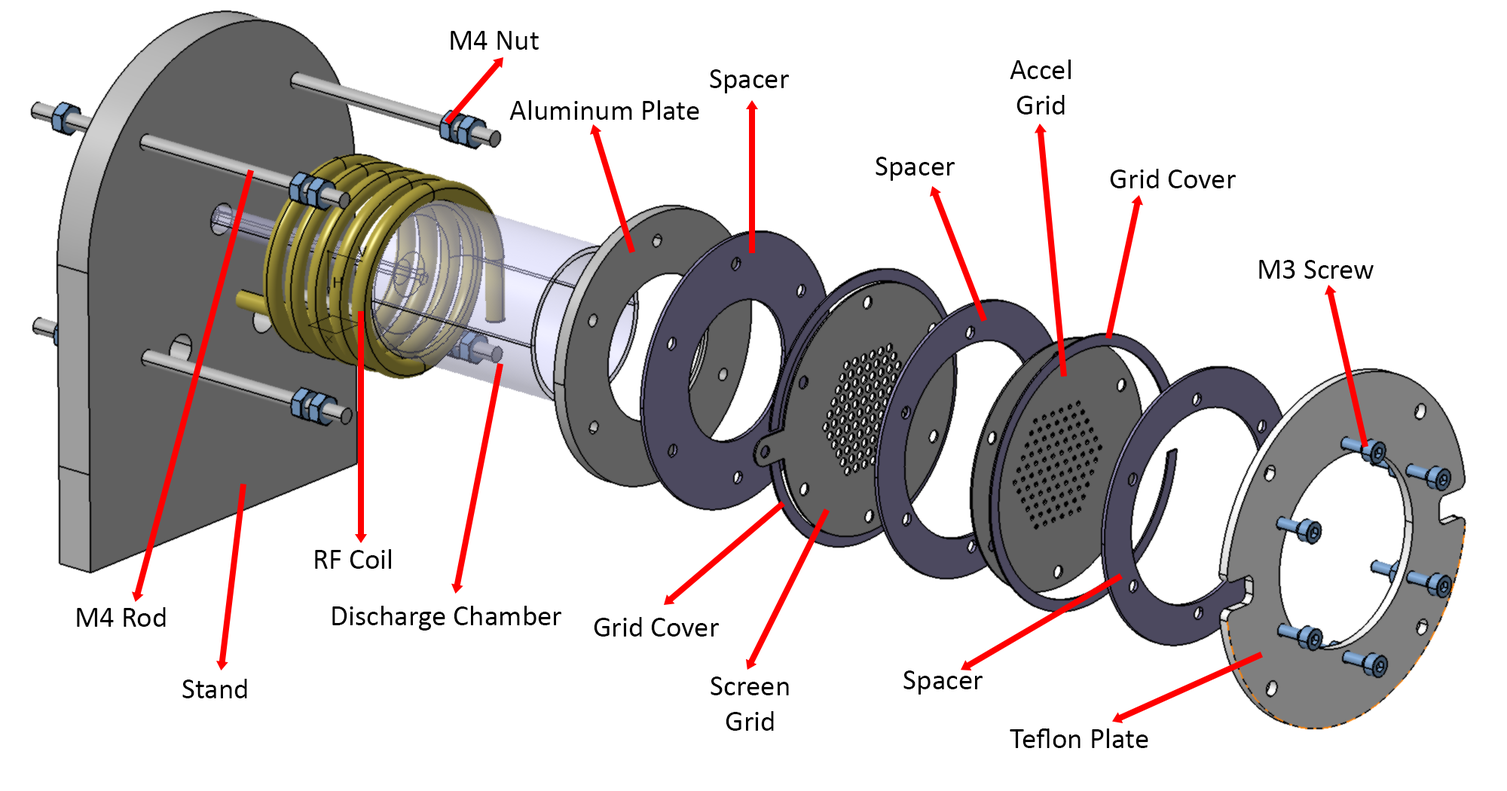
<style>
.page{position:relative;width:1507px;height:791px;background:#ffffff}
.page>*{position:absolute;margin:0}
.t1{font:29.4px "Calibri";color:#000000}
</style>
<div class="page">
<p class="t1" style="left:451px;top:31px;width:88px;height:19px">M4 Nut</p>
<p class="t1" style="left:1010px;top:60px;width:61px;height:55px;text-align:center">Accel<br>Grid</p>
<p class="t1" style="left:710px;top:69px;width:79px;height:24px">Spacer</p>
<p class="t1" style="left:509px;top:100px;width:190px;height:20px">Aluminum Plate</p>
<p class="t1" style="left:876px;top:157px;width:79px;height:24px">Spacer</p>
<p class="t1" style="left:1110px;top:169px;width:126px;height:19px">Grid Cover</p>
<p class="t1" style="left:1259px;top:260px;width:115px;height:19px">M3 Screw</p>
<p class="t1" style="left:315px;top:549px;width:76px;height:20px">RF Coil</p>
<p class="t1" style="left:332px;top:606px;width:229px;height:25px">Discharge Chamber</p>
<p class="t1" style="left:77px;top:607px;width:89px;height:20px">M4 Rod</p>
<p class="t1" style="left:594px;top:617px;width:125px;height:20px">Grid Cover</p>
<p class="t1" style="left:711px;top:677px;width:78px;height:54px;text-align:center">Screen<br>Grid</p>
<p class="t1" style="left:903px;top:671px;width:80px;height:24px">Spacer</p>
<p class="t1" style="left:182px;top:679px;width:65px;height:20px">Stand</p>
<p class="t1" style="left:1010px;top:729px;width:138px;height:19px">Teflon Plate</p>
</div>
